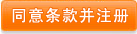
<style>
.page{position:relative;width:137px;height:34px}
.page>*{position:absolute;margin:0}
.t1{font:16px "SimHei";letter-spacing:0.06em;color:#ffffff}
</style>
<div class="page">
<p class="t1" style="left:12px;top:7px;width:117px;height:16px">同意条款并注册</p>
</div>
